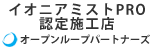
<style>
.page{position:relative;width:154px;height:50px;background:#ffffff}
.page>*{position:absolute;margin:0}
.t1{font:14px/14px "KozGoPr6N-Bold";letter-spacing:0.1em;color:#333333}
.t2{font:10px "KozGoPr6N-Bold";color:#333333}
</style>
<div class="page">
<p class="t1" style="left:9px;top:3px;width:136px;height:28px;text-align:center">イオニアミストPRO<br>認定施工店</p>
<p class="t2" style="left:20px;top:34px;width:130px;height:10px">オープンループパートナーズ</p>
</div>
